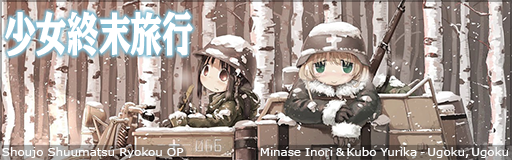
<style>
.page{position:relative;width:512px;height:160px}
.page>*{position:absolute;margin:0}
.t1{font:48px "PSP-NOW-MU-90pv-RKSJ-H";letter-spacing:-0.01em;color:#ffffff;scale:0.67 1}
.t2{font:11.5px "Verdana";letter-spacing:-0.01em;color:#ffffff;scale:1.05 1}
.t3{font:11.5px "Verdana";letter-spacing:-0.1em;color:#ffffff;scale:1.05 1}
</style>
<div class="page">
<p class="t1" style="left:5px;top:11px;width:188px;height:46px">少女終末旅行</p>
<p class="t2" style="left:2px;top:147px;width:182px;height:11px">Shoujo Shuumatsu Ryokou OP</p>
<p class="t2" style="left:260px;top:147px;width:248px;height:11px">Minase Inori<span class="t3"> &amp; </span>Kubo Yurika<span class="t3"> - </span>Ugoku<span class="t3">, </span>Ugoku</p>
</div>
